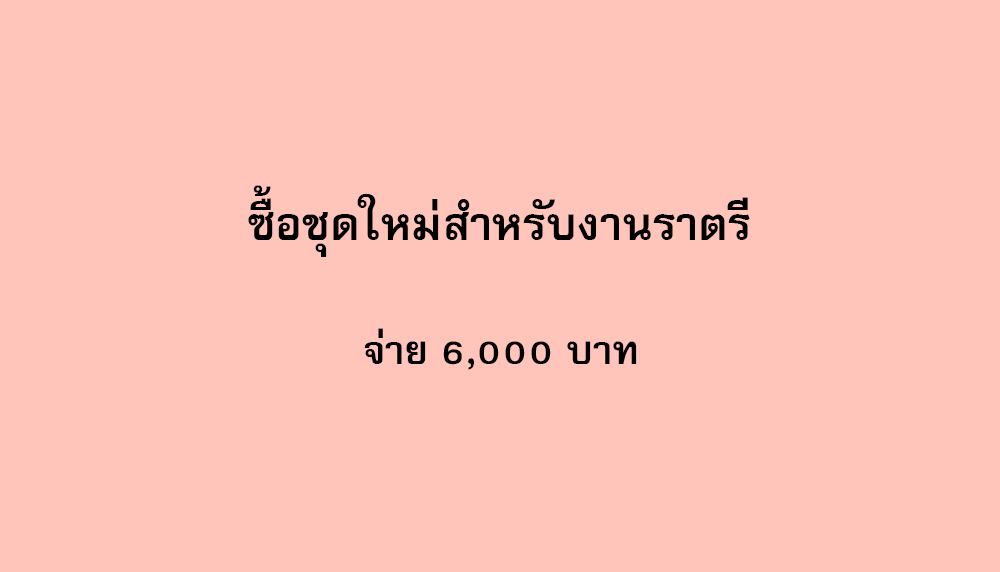
<style>
.page{position:relative;width:1000px;height:572px;background:#ffc4ba}
.page>*{position:absolute;margin:0}
.t1{font:64px "FreesiaUPCBold";color:#000000}
.t2{font:56px "FreesiaUPCBold";color:#000000}
</style>
<div class="page">
<p class="t1" style="left:248px;top:185px;width:502px;height:72px">ซื้อชุดใหม่สำหรับงานราตรี</p>
<p class="t2" style="left:364px;top:328px;width:273px;height:42px">จ่าย 6,000 บาท</p>
</div>
